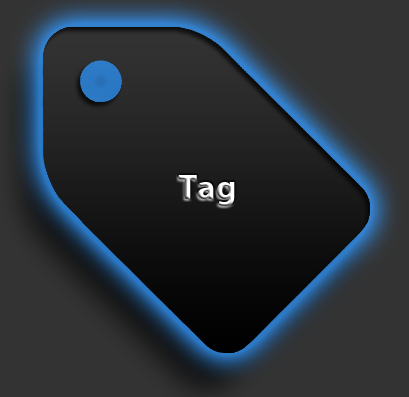
<style>
.page{position:relative;width:409px;height:397px;background:#333333}
.page>*{position:absolute;margin:0}
.t1{font:35px "MyriadPro-Bold"}
</style>
<div class="page">
<p class="t1" style="left:178px;top:175px;width:57px;height:31px">Tag</p>
</div>
